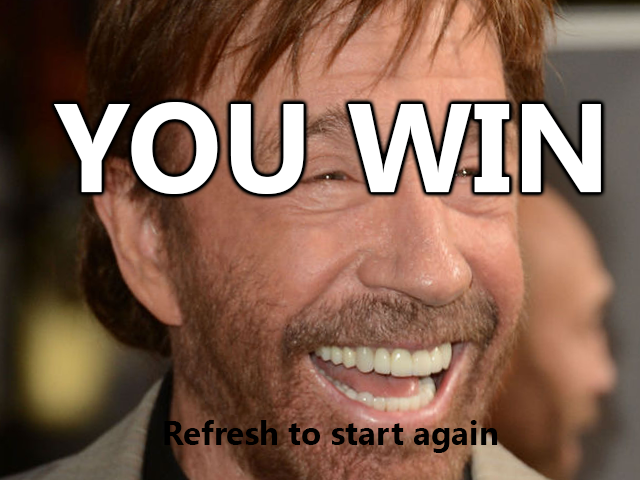
<style>
.page{position:relative;width:640px;height:480px}
.page>*{position:absolute;margin:0}
.t1{font:125px "KhmerUI-Bold";color:#ffffff}
.t2{font:33.3px "KhmerUI-Bold";color:#000000}
</style>
<div class="page">
<p class="t1" style="left:54px;top:102px;width:547px;height:92px">YOU WIN</p>
<p class="t2" style="left:164px;top:420px;width:334px;height:33px">Refresh to start again</p>
</div>
